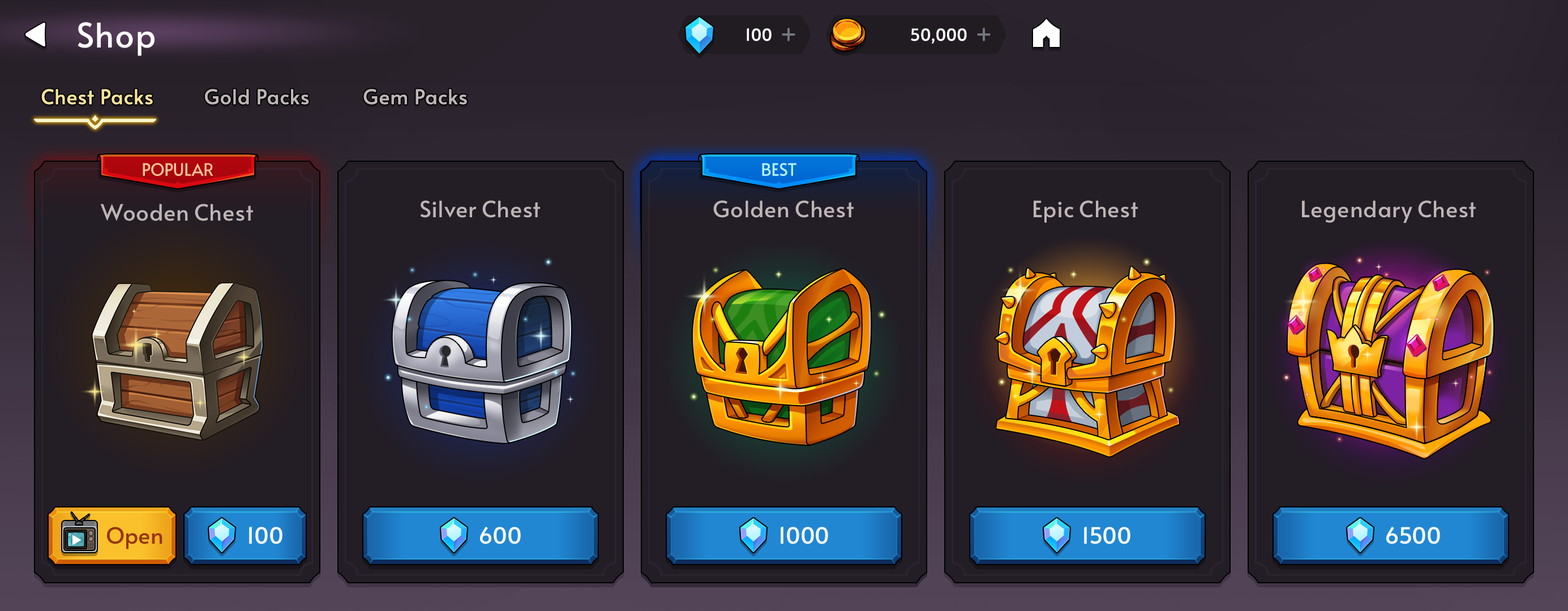
<style>
.page{position:relative;width:1568px;height:611px;background:#231d25}
.page>*{position:absolute;margin:0}
.t1{font:34px "Alata-Regular";color:#ffffff}
.t2{font:16.4px "Alata-Regular";letter-spacing:-0.025em;color:#ffffff;font-weight:bold}
.t3{font:20.4px "Alata-Regular";color:#f6e19c;font-weight:bold}
.t4{font:20.4px "Alata-Regular";color:#beb5b6;font-weight:bold}
.t5{font:17px "Alata-Regular";color:#ffc69c;text-transform:uppercase}
.t6{font:17px "Alata-Regular";color:#b6f5ff;text-transform:uppercase}
.t7{font:22.6px "Alata-Regular";letter-spacing:-0.01em;color:#beb5b6}
.t8{font:22.6px "Alata-Regular";color:#973504}
.t9{font:22.6px "Alata-Regular";color:#ffffff}
</style>
<div class="page">
<p class="t1" style="left:78px;top:22px;width:77px;height:34px">Shop</p>
<p class="t2" style="left:747px;top:28px;width:25px;height:13px">100</p>
<p class="t2" style="left:911px;top:28px;width:56px;height:16px">50,000</p>
<p class="t3" style="left:41px;top:89px;width:112px;height:16px">Chest Packs</p>
<p class="t4" style="left:205px;top:89px;width:104px;height:16px">Gold Packs</p>
<p class="t4" style="left:363px;top:89px;width:104px;height:16px">Gem Packs</p>
<p class="t5" style="left:143px;top:163px;width:70px;height:13px">popular</p>
<p class="t6" style="left:762px;top:163px;width:34px;height:13px">Best</p>
<p class="t7" style="left:100px;top:204px;width:153px;height:17px">Wooden Chest</p>
<p class="t7" style="left:420px;top:200px;width:120px;height:18px">Silver Chest</p>
<p class="t7" style="left:713px;top:200px;width:141px;height:18px">Golden Chest</p>
<p class="t7" style="left:1034px;top:200px;width:104px;height:23px">Epic Chest</p>
<p class="t7" style="left:1302px;top:200px;width:174px;height:23px">Legendary Chest</p>
<p class="t8" style="left:107px;top:527px;width:55px;height:23px">Open</p>
<p class="t9" style="left:249px;top:527px;width:33px;height:18px">100</p>
<p class="t9" style="left:480px;top:527px;width:41px;height:18px">600</p>
<p class="t9" style="left:781px;top:527px;width:47px;height:18px">1000</p>
<p class="t9" style="left:1084px;top:527px;width:46px;height:18px">1500</p>
<p class="t9" style="left:1386px;top:527px;width:54px;height:18px">6500</p>
</div>
